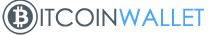
<style>
.page{position:relative;width:210px;height:35px;background:#ffffff}
.page>*{position:absolute;margin:0}
.t1{font:24px "CenturyGothic";color:#4e5a64}
.t2{font:24px "CenturyGothic";color:#49a7fa}
</style>
<div class="page">
<p class="t1" style="left:40px;top:8px;width:164px;height:19px">ITCOIN<span class="t2">WALLET</span></p>
</div>
